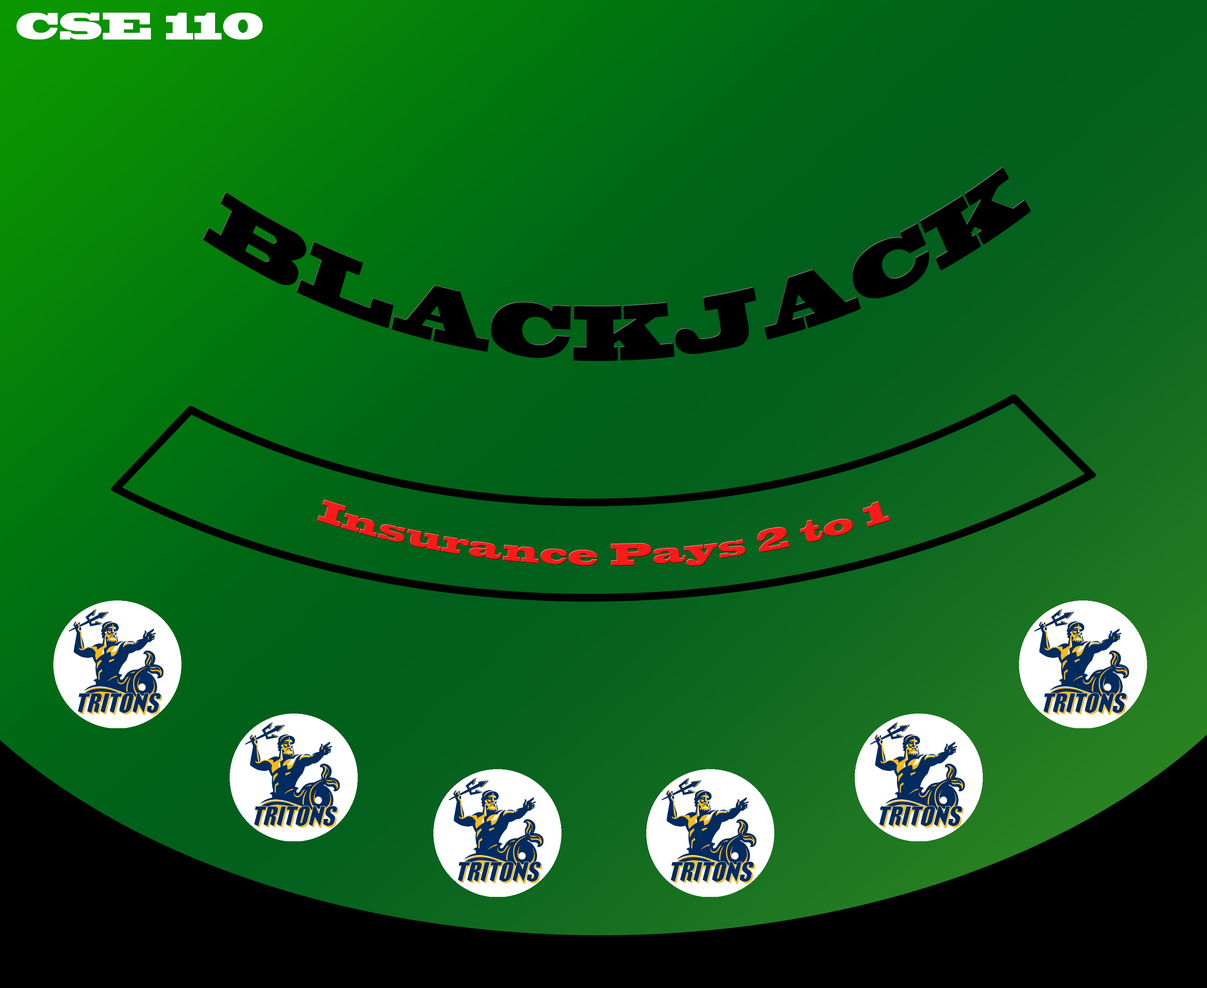
<style>
.page{position:relative;width:1207px;height:988px}
.page>*{position:absolute;margin:0}
.t1{font:35.7px "BlackoakStd";color:#ffffff;scale:0.77 1}
.t2{font:73.3px "BlackoakStd";color:#000000;scale:0.66 1}
.t3{font:29.3px/62.7px "BlackoakStd";color:#ff1919;scale:0.77 1}
</style>
<div class="page">
<p class="t1" style="left:16px;top:12px;width:247px;height:28px">CSE 110</p>
<p class="t2" style="left:203px;top:167px;width:828px;height:194px;rotate:-2deg">BLACKJACK</p>
<p class="t3" style="left:317px;top:499px;width:573px;height:67px">Insurance Pays 2 to 1</p>
</div>
